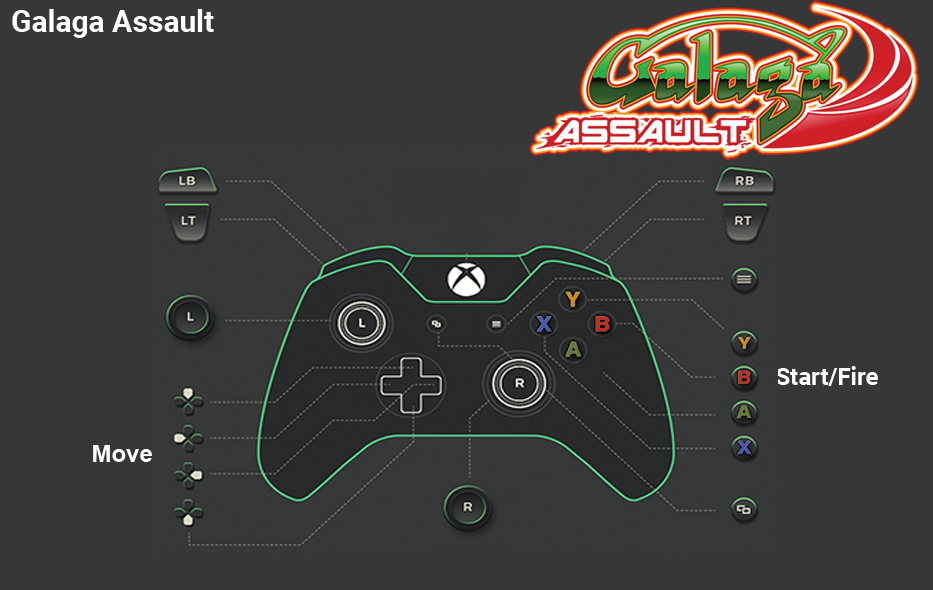
<style>
.page{position:relative;width:933px;height:590px;background:#363838}
.page>*{position:absolute;margin:0}
.t1{font:30px "Roboto-Bold";color:#ffffff}
.t2{font:24px "Roboto-Bold";color:#ffffff}
.t3{font:24px "Arial-BoldMT";color:#fefefe}
</style>
<div class="page">
<p class="t1" style="left:12px;top:9px;width:202px;height:29px">Galaga Assault</p>
<p class="t2" style="left:776px;top:366px;width:102px;height:20px">Start/Fire</p>
<p class="t3" style="left:93px;top:445px;width:59px;height:17px">Move</p>
</div>
